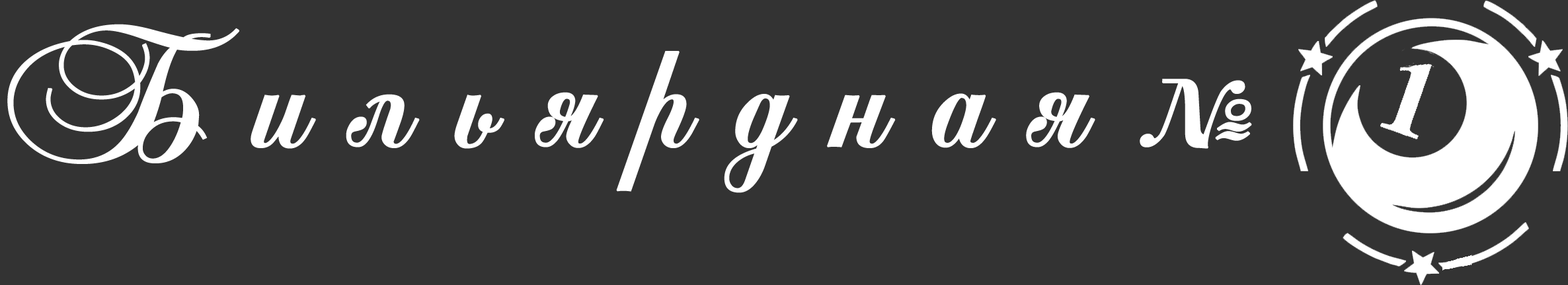
<style>
.page{position:relative;width:1568px;height:285px;background:#333333}
.page>*{position:absolute;margin:0}
.t1{font:205.4px "KZBalmoral-Regular";letter-spacing:0.139em;color:#ffffff;font-weight:bold;scale:1.27 1}
.t2{font:205.4px "KZBalmoral-Regular";letter-spacing:0.259em;color:#ffffff;font-weight:bold;scale:1.27 1}
</style>
<div class="page">
<p class="t1" style="left:7px;top:24px;width:1245px;height:169px">Бильярдна<span class="t2">я№</span></p>
</div>
